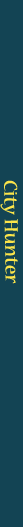
<style>
.page{position:relative;width:23px;height:527px;background:#134454}
.page>*{position:absolute;margin:0}
.t1{font:20.7px "NuevaStd-Cond";color:#fce54a;scale:1.44 1}
</style>
<div class="page">
<p class="t1" style="left:0px;top:180px;width:18px;height:104px;rotate:89deg">City Hunter</p>
</div>
